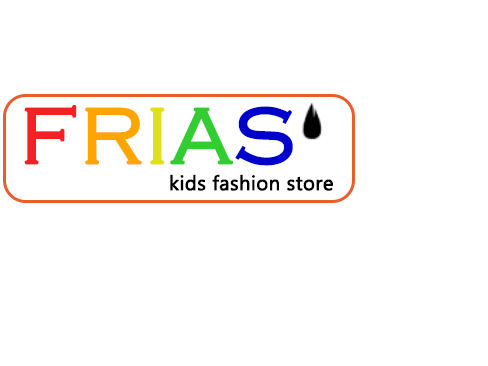
<style>
.page{position:relative;width:488px;height:366px;background:#ffffff}
.page>*{position:absolute;margin:0}
.t1{font:81.8px "CopperplateGothic-Light";color:#f22222;font-weight:bold}
.t2{font:81.8px "CopperplateGothic-Light";color:#ffa500;font-weight:bold}
.t3{font:81.8px "CopperplateGothic-Light";color:#dfdf1c;font-weight:bold}
.t4{font:81.8px "CopperplateGothic-Light";color:#32cd32;font-weight:bold}
.t5{font:81.8px "CopperplateGothic-Light";color:#0000cd;font-weight:bold}
.t6{font:20.2px "Ebrima";color:#000000;font-weight:bold}
</style>
<div class="page">
<p class="t1" style="left:24px;top:105px;width:269px;height:61px">F<span class="t2">R</span><span class="t3">I</span><span class="t4">A</span><span class="t5">S</span></p>
<p class="t6" style="left:170px;top:174px;width:163px;height:17px">kids fashion store</p>
</div>
